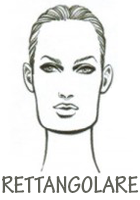
<style>
.page{position:relative;width:140px;height:200px;background:#ffffff}
.page>*{position:absolute;margin:0}
.t1{font:25px "TektonPro-BoldCond";color:#606159}
</style>
<div class="page">
<p class="t1" style="left:2px;top:176px;width:137px;height:17px">RETTANGOLARE</p>
</div>
